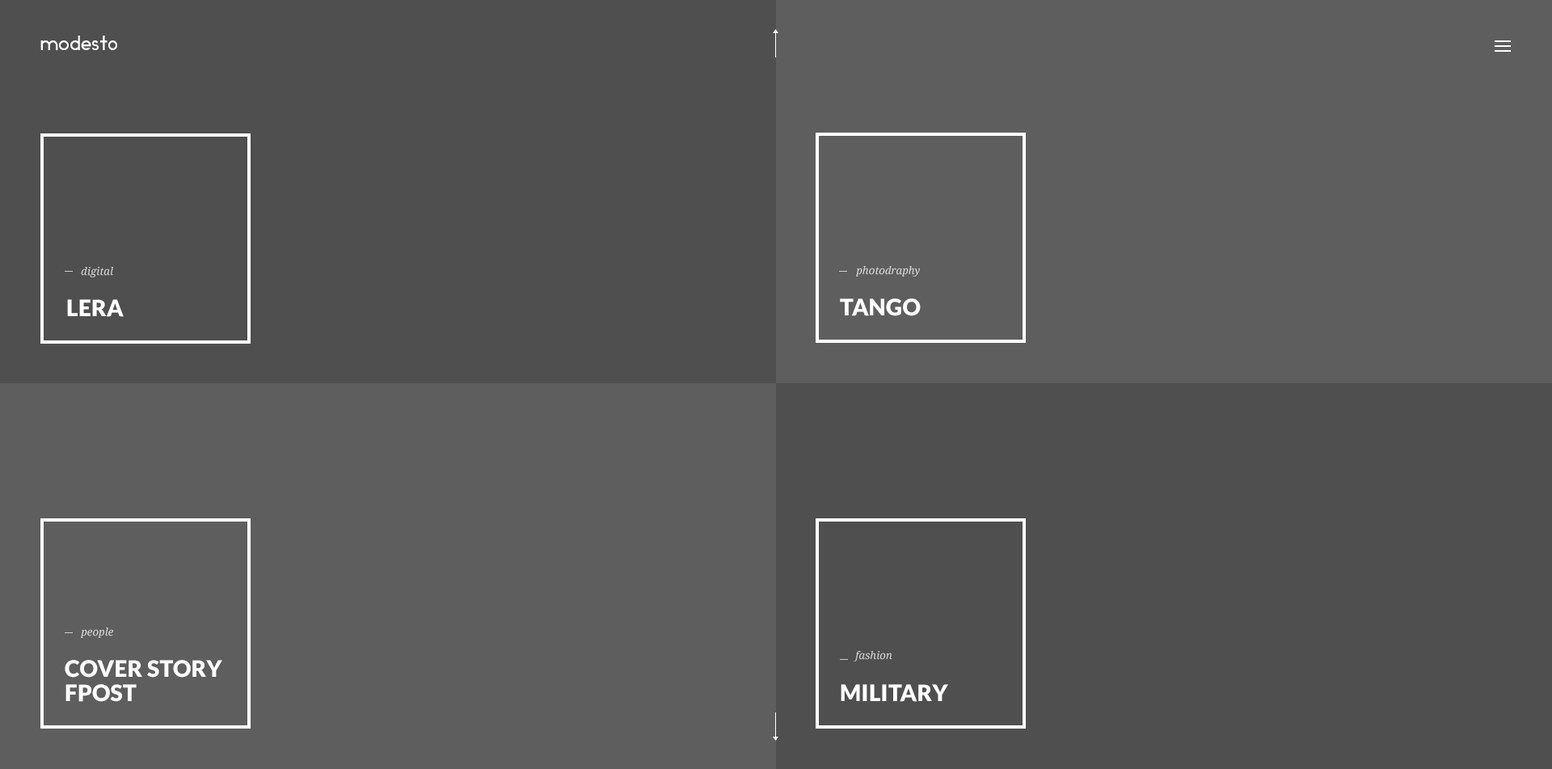
<style>
.page{position:relative;width:1552px;height:769px;background:#5e5e5e}
.page>*{position:absolute;margin:0}
.t1{font:19.4px "Ikaros";letter-spacing:0.025em;color:#ffffff}
.t2{font:10.5px "DroidSerif-Italic";letter-spacing:0.01em;color:#d5d5d5}
.t3{font:10.5px "DroidSerif-Italic";letter-spacing:0.01em;color:#d7d7d7}
.t4{font:22.6px "Lato-Black";letter-spacing:0.01em;color:#ffffff;text-transform:uppercase}
.t5{font:22.6px/24.4px "Lato-Black";letter-spacing:0.01em;color:#ffffff;text-transform:uppercase}
</style>
<div class="page">
<p class="t1" style="left:40px;top:36px;width:77px;height:14px">modesto</p>
<p class="t2" style="left:81px;top:267px;width:32px;height:10px">digital</p>
<p class="t3" style="left:856px;top:266px;width:64px;height:10px">photodraphy</p>
<p class="t4" style="left:67px;top:299px;width:57px;height:18px">Lera</p>
<p class="t4" style="left:840px;top:298px;width:80px;height:18px">TANGO</p>
<p class="t3" style="left:81px;top:627px;width:32px;height:11px">people</p>
<p class="t2" style="left:853px;top:651px;width:39px;height:10px">fashion</p>
<p class="t5" style="left:65px;top:659px;width:157px;height:42px">Cover story<br>FPost</p>
<p class="t4" style="left:840px;top:684px;width:108px;height:17px">Military</p>
</div>
